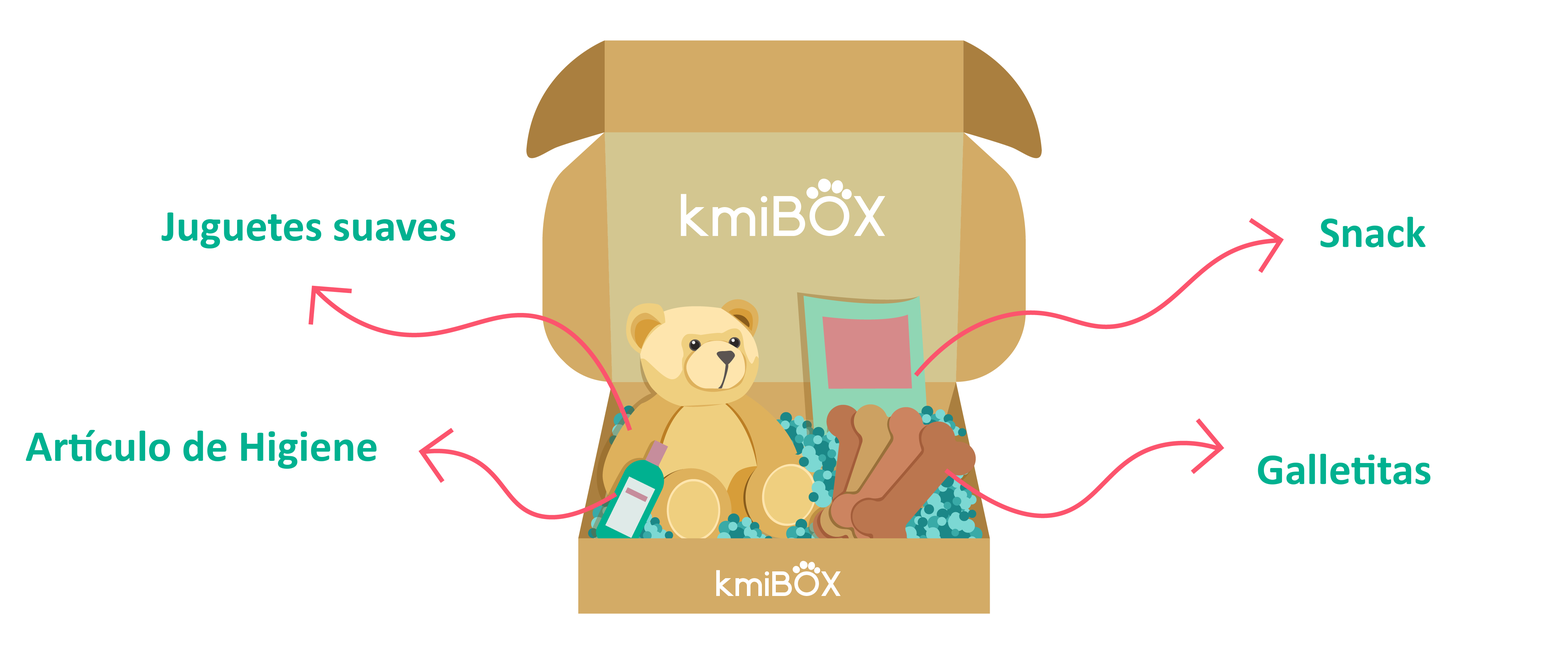
<style>
.page{position:relative;width:1568px;height:658px;background:#ffffff}
.page>*{position:absolute;margin:0}
.t1{font:44.6px "Calibri-Bold";color:#00b190}
</style>
<div class="page">
<p class="t1" style="left:162px;top:212px;width:294px;height:36px">Juguetes suaves</p>
<p class="t1" style="left:1320px;top:217px;width:106px;height:30px">Snack</p>
<p class="t1" style="left:26px;top:430px;width:350px;height:39px">Artículo de Higiene</p>
<p class="t1" style="left:1258px;top:454px;width:173px;height:31px">Galletitas</p>
</div>
